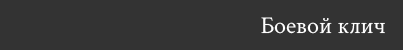
<style>
.page{position:relative;width:403px;height:50px;background:#333333}
.page>*{position:absolute;margin:0}
.t1{font:24px "CrimsonText-Regular";color:#ffffff}
</style>
<div class="page">
<p class="t1" style="left:261px;top:17px;width:124px;height:17px">Боевой клич</p>
</div>
